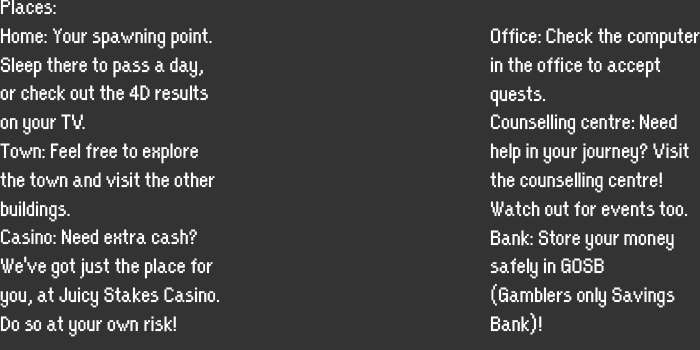
<style>
.page{position:relative;width:700px;height:350px;background:#333333}
.page>*{position:absolute;margin:0}
.t1{font:24px "OrangeKid-Regular";color:#ffffff}
</style>
<div class="page">
<p class="t1" style="left:0px;top:0px;width:220px;height:337px">Places: <br>Home: Your spawning point. <br>Sleep there to pass a day, <br>or check out the 4D results <br>on your TV.<br>Town: Feel free to explore <br>the town and visit the other <br>buildings.<br>Casino: Need extra cash? <br>We've got just the place for <br>you, at Juicy Stakes Casino. <br>Do so at your own risk!</p>
<p class="t1" style="left:490px;top:28px;width:210px;height:307px">Office: Check the computer <br>in the office to accept <br>quests.<br>Counselling centre: Need <br>help in your journey? Visit <br>the counselling centre! <br>Watch out for events too.<br>Bank: Store your money <br>safely in GOSB <br>(Gamblers only Savings <br>Bank)!</p>
</div>
